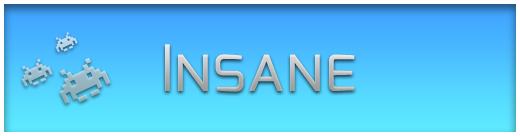
<style>
.page{position:relative;width:520px;height:136px}
.page>*{position:absolute;margin:0}
.t1{font:64px "Exo-Regular";font-variant:small-caps}
</style>
<div class="page">
<p class="t1" style="left:165px;top:44px;width:190px;height:48px">Insane</p>
</div>
